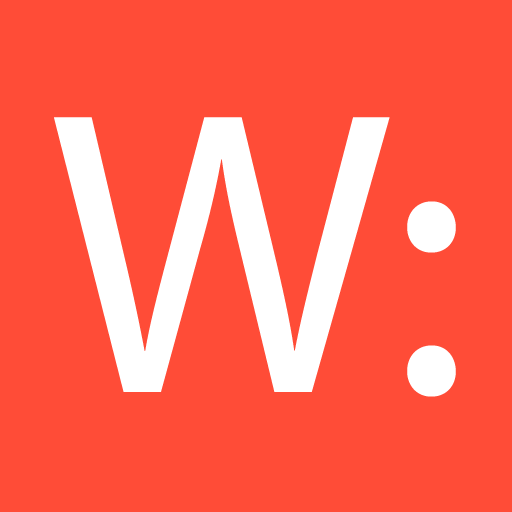
<style>
.page{position:relative;width:512px;height:512px;background:#ff4c37}
.page>*{position:absolute;margin:0}
.t1{font:407.7px "MyriadPro-Regular";color:#ffffff}
</style>
<div class="page">
<p class="t1" style="left:54px;top:117px;width:402px;height:280px">W:</p>
</div>
